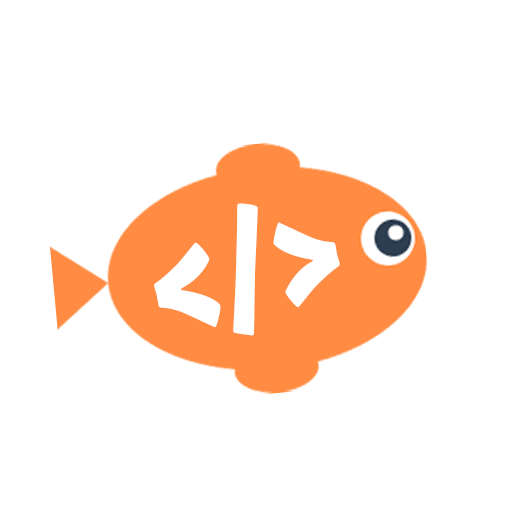
<style>
.page{position:relative;width:512px;height:512px;background:#ffffff}
.page>*{position:absolute;margin:0}
.t1{font:173.7px "BerlinSansFBDemi-Bold";color:#ffffff}
</style>
<div class="page">
<p class="t1" style="left:154px;top:203px;width:186px;height:133px;rotate:-13deg">&lt;/&gt;</p>
</div>
